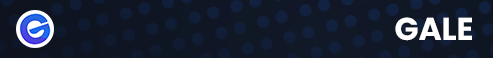
<style>
.page{position:relative;width:493px;height:58px}
.page>*{position:absolute;margin:0}
.t1{font:31.6px "Poppins-Bold";color:#ffffff}
</style>
<div class="page">
<p class="t1" style="left:395px;top:17px;width:77px;height:24px">GALE</p>
</div>
